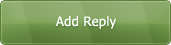
<style>
.page{position:relative;width:171px;height:45px}
.page>*{position:absolute;margin:0}
.t1{font:13px "Tahoma";letter-spacing:0.025em;color:#ffffff}
</style>
<div class="page">
<p class="t1" style="left:55px;top:16px;width:62px;height:13px">Add Reply</p>
</div>
